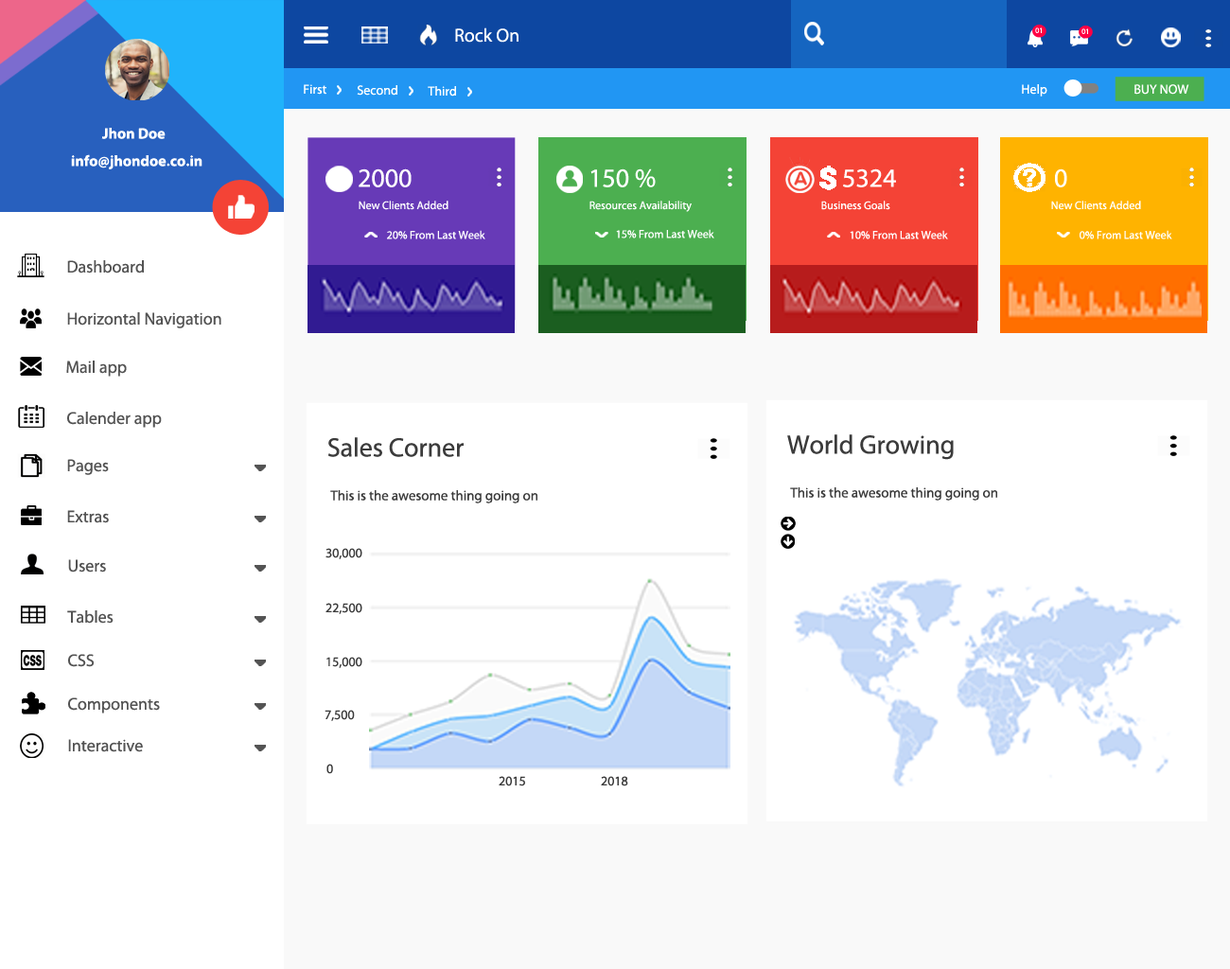
<style>
.page{position:relative;width:1230px;height:969px;background:#ffffff}
.page>*{position:absolute;margin:0}
.t1{font:18.9px "MyriadPro-Regular";color:#ffffff}
.t2{font:7.6px "MyriadPro-Regular";color:#ffffff}
.t3{font:13.3px "MyriadPro-Regular";color:#ffffff}
.t4{font:15.1px "MyriadPro-Bold";color:#ffffff}
.t5{font:26.5px "MyriadPro-Regular";color:#ffffff}
.t6{font:11.4px "MyriadPro-Regular";color:#ffffff}
.t7{font:17px "MyriadPro-Regular";color:#535353}
.t8{font:26.5px "MyriadPro-Regular";color:#3b3b3b}
.t9{font:14px "MyriadPro-Regular";color:#3b3b3b}
.t10{font:13.3px "MyriadPro-Regular";color:#3b3b3b}
</style>
<div class="page">
<p class="t1" style="left:455px;top:27px;width:64px;height:16px">Rock On</p>
<p class="t2" style="left:1035px;top:27px;width:7px;height:6px">01</p>
<p class="t2" style="left:1082px;top:28px;width:6px;height:6px">01</p>
<p class="t3" style="left:304px;top:84px;width:23px;height:11px">First</p>
<p class="t3" style="left:357px;top:85px;width:41px;height:11px">Second</p>
<p class="t3" style="left:428px;top:86px;width:28px;height:11px">Third</p>
<p class="t3" style="left:1022px;top:84px;width:26px;height:13px">Help</p>
<p class="t3" style="left:1135px;top:84px;width:55px;height:11px">BUY NOW</p>
<p class="t4" style="left:101px;top:128px;width:65px;height:11px">Jhon Doe</p>
<p class="t4" style="left:71px;top:154px;width:132px;height:15px">info@jhondoe.co.in</p>
<p class="t5" style="left:359px;top:168px;width:53px;height:19px">2000</p>
<p class="t5" style="left:591px;top:168px;width:65px;height:19px">150 %</p>
<p class="t5" style="left:843px;top:168px;width:53px;height:19px">5324</p>
<p class="t5" style="left:1055px;top:168px;width:13px;height:19px">0</p>
<p class="t6" style="left:359px;top:201px;width:90px;height:9px">New Clients Added</p>
<p class="t6" style="left:590px;top:201px;width:102px;height:11px">Resources Availability</p>
<p class="t6" style="left:822px;top:201px;width:69px;height:9px">Business Goals</p>
<p class="t6" style="left:1052px;top:201px;width:89px;height:9px">New Clients Added</p>
<p class="t6" style="left:387px;top:230px;width:99px;height:9px">20% From Last Week</p>
<p class="t6" style="left:616px;top:229px;width:99px;height:10px">15% From Last Week</p>
<p class="t6" style="left:850px;top:230px;width:98px;height:9px">10% From Last Week</p>
<p class="t6" style="left:1080px;top:230px;width:93px;height:9px">0% From Last Week</p>
<p class="t7" style="left:67px;top:260px;width:77px;height:14px">Dashboard</p>
<p class="t7" style="left:67px;top:312px;width:154px;height:16px">Horizontal Navigation</p>
<p class="t7" style="left:66px;top:361px;width:61px;height:16px">Mail app</p>
<p class="t7" style="left:67px;top:412px;width:95px;height:16px">Calender app</p>
<p class="t8" style="left:328px;top:437px;width:136px;height:20px">Sales Corner</p>
<p class="t8" style="left:787px;top:434px;width:167px;height:26px">World Growing</p>
<p class="t7" style="left:67px;top:459px;width:42px;height:16px">Pages</p>
<p class="t9" style="left:330px;top:490px;width:208px;height:14px">This is the awesome thing going on</p>
<p class="t9" style="left:790px;top:487px;width:208px;height:14px">This is the awesome thing going on</p>
<p class="t7" style="left:67px;top:510px;width:42px;height:13px">Extras</p>
<p class="t10" style="left:326px;top:548px;width:36px;height:11px">30,000</p>
<p class="t7" style="left:68px;top:559px;width:38px;height:14px">Users</p>
<p class="t10" style="left:326px;top:603px;width:36px;height:11px">22,500</p>
<p class="t7" style="left:67px;top:610px;width:47px;height:14px">Tables</p>
<p class="t7" style="left:68px;top:654px;width:26px;height:13px">CSS</p>
<p class="t10" style="left:327px;top:657px;width:35px;height:11px">15,000</p>
<p class="t7" style="left:68px;top:698px;width:92px;height:16px">Components</p>
<p class="t10" style="left:325px;top:710px;width:30px;height:11px">7,500</p>
<p class="t7" style="left:68px;top:739px;width:75px;height:13px">Interactive</p>
<p class="t10" style="left:327px;top:764px;width:6px;height:10px">0</p>
<p class="t10" style="left:499px;top:776px;width:26px;height:10px">2015</p>
<p class="t10" style="left:601px;top:776px;width:27px;height:10px">2018</p>
</div>
